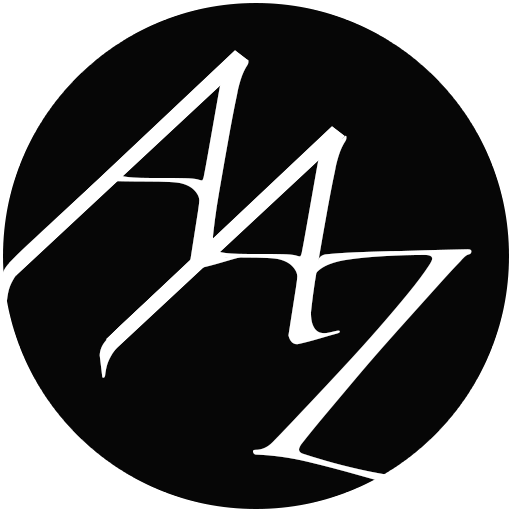
<style>
.page{position:relative;width:512px;height:512px;background:#060606}
.page>*{position:absolute;margin:0}
.t1{font:176px "Zapfino";color:#ffffff}
.t2{font:186.6px "Zapfino";color:#ffffff;scale:0.81 1}
</style>
<div class="page">
<p class="t1" style="left:1px;top:59px;width:248px;height:243px">A</p>
<p class="t1" style="left:99px;top:135px;width:248px;height:243px">A</p>
<p class="t2" style="left:253px;top:249px;width:252px;height:245px">Z</p>
</div>
